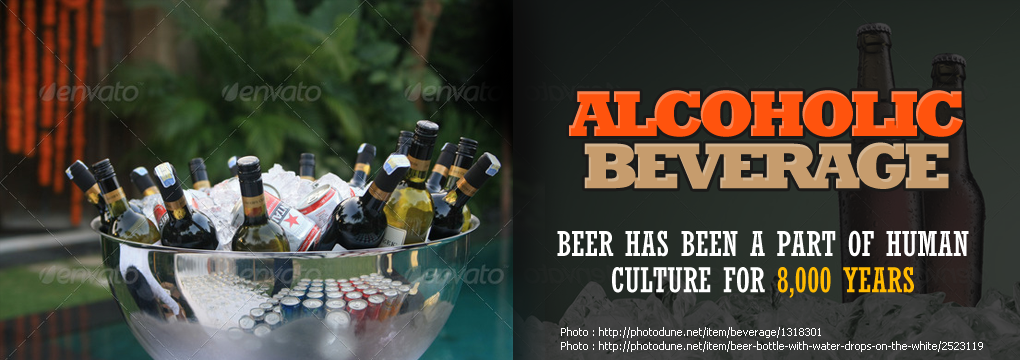
<style>
.page{position:relative;width:1020px;height:360px}
.page>*{position:absolute;margin:0}
.t1{font:66px/52.3px "Rockwell-ExtraBold";letter-spacing:-0.1em;color:#ff530d;text-transform:uppercase}
.t2{font:66px/52.3px "Rockwell-ExtraBold";letter-spacing:-0.1em;color:#c69c6d;text-transform:uppercase}
.t3{font:34px/36.3px "Rockwell-Condensed";color:#ffffff;text-transform:uppercase}
.t4{font:34px/36.3px "Rockwell-Condensed";color:#ffba00;text-transform:uppercase}
.t5{font:11px "Tahoma";color:#ffffff}
</style>
<div class="page">
<p class="t1" style="left:569px;top:90px;width:394px;height:99px;text-align:center">alcoholic<br><span class="t2">beverage</span></p>
<p class="t3" style="left:557px;top:230px;width:412px;height:68px;text-align:center">Beer has been a part of human<br>culture for <span class="t4">8,000 years</span></p>
<p class="t5" style="left:561px;top:327px;width:260px;height:11px">Photo : http://photodune.net/item/beverage/1318301</p>
<p class="t5" style="left:561px;top:341px;width:422px;height:11px">Photo : http://photodune.net/item/beer-bottle-with-water-drops-on-the-white/2523119</p>
</div>
